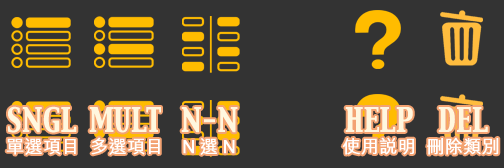
<style>
.page{position:relative;width:504px;height:168px;background:#333333}
.page>*{position:absolute;margin:0}
.t1{font:29.4px "CapitalsRegular";color:#fff7df;font-weight:bold;scale:0.87 1}
.t2{font:29.4px "CapitalsRegular";letter-spacing:-0.04em;color:#fff7df;font-weight:bold;scale:0.87 1}
.t3{font:18px "MHeiHK-Medium";color:#ffffff;font-weight:bold}
.t4{font:18px "MHeiHK-Medium";letter-spacing:0.24em;color:#ffffff;font-weight:bold}
</style>
<div class="page">
<p class="t1" style="left:8px;top:106px;width:69px;height:27px">SNGL</p>
<p class="t2" style="left:89px;top:107px;width:72px;height:26px">MULT</p>
<p class="t1" style="left:181px;top:107px;width:57px;height:26px">N-N</p>
<p class="t1" style="left:345px;top:107px;width:68px;height:25px">HELP</p>
<p class="t1" style="left:438px;top:107px;width:50px;height:25px">DEL</p>
<p class="t3" style="left:91px;top:137px;width:69px;height:18px">多選項目</p>
<p class="t3" style="left:342px;top:137px;width:72px;height:18px">使用說明</p>
<p class="t3" style="left:427px;top:137px;width:72px;height:18px">刪除類別</p>
<p class="t3" style="left:6px;top:138px;width:70px;height:17px">單選項目</p>
<p class="t4" style="left:183px;top:138px;width:52px;height:17px">N選N</p>
</div>
